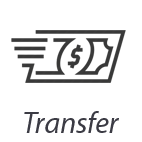
<style>
.page{position:relative;width:142px;height:142px;background:#ffffff}
.page>*{position:absolute;margin:0}
.t1{font:30px "MyriadPro-It";color:#3b3b44}
</style>
<div class="page">
<p class="t1" style="left:24px;top:111px;width:95px;height:22px">Transfer</p>
</div>
